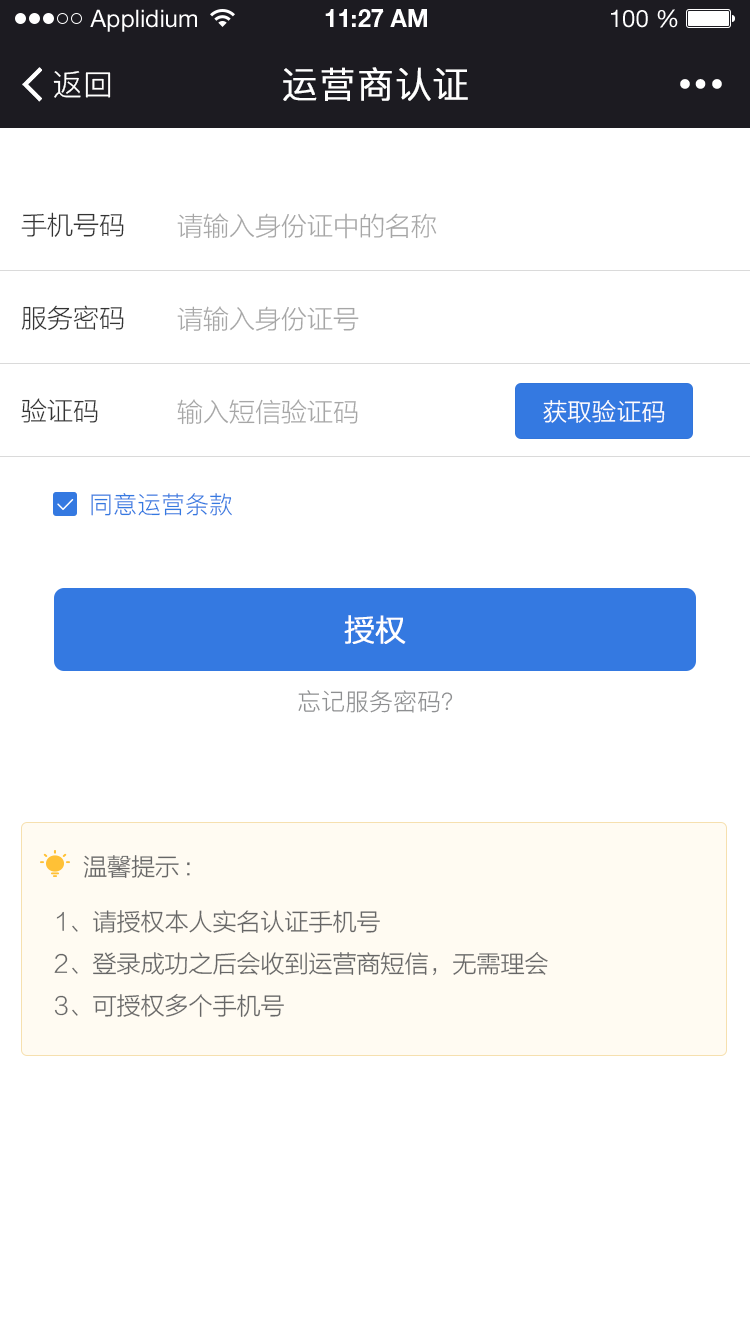
<style>
.page{position:relative;width:750px;height:1334px;background:#ffffff}
.page>*{position:absolute;margin:0}
.t1{font:24px "HelveticaNeueLTStd-Roman";color:#ffffff}
.t2{font:24px "HelveticaNeueLTStd-Bd";color:#ffffff}
.t3{font:30px "PingFang-SC-Regular";letter-spacing:0.025em;color:#ffffff}
.t4{font:36px "PingFang-SC-Regular";letter-spacing:0.025em;color:#ffffff;font-weight:bold}
.t5{font:26px "FZLTXHK--GBK1-0";color:#333333}
.t6{font:26px "FZLTXHK--GBK1-0";color:#a6a6a6}
.t7{font:24px "FZLTXHK--GBK1-0";letter-spacing:0.025em;color:#ffffff}
.t8{font:24px "PingFang-SC-Regular";color:#3479e1}
.t9{font:30px "FZLTXHK--GBK1-0";color:#ffffff;font-weight:bold}
.t10{font:24px "PingFang-SC-Regular";color:#8e8f91}
.t11{font:24px "FZLTXHK--GBK1-0";color:#666666}
</style>
<div class="page">
<p class="t1" style="left:90px;top:9px;width:107px;height:23px">Applidium</p>
<p class="t2" style="left:325px;top:9px;width:102px;height:18px">11:27 AM</p>
<p class="t1" style="left:611px;top:9px;width:67px;height:19px">100 %</p>
<p class="t3" style="left:53px;top:71px;width:58px;height:27px">返回</p>
<p class="t4" style="left:283px;top:67px;width:185px;height:34px">运营商认证</p>
<p class="t5" style="left:21px;top:212px;width:103px;height:25px">手机号码</p>
<p class="t6" style="left:177px;top:213px;width:260px;height:26px">请输入身份证中的名称</p>
<p class="t5" style="left:21px;top:305px;width:103px;height:26px">服务密码</p>
<p class="t6" style="left:177px;top:306px;width:182px;height:26px">请输入身份证号</p>
<p class="t5" style="left:21px;top:398px;width:77px;height:25px">验证码</p>
<p class="t6" style="left:177px;top:399px;width:181px;height:26px">输入短信验证码</p>
<p class="t7" style="left:543px;top:400px;width:122px;height:23px">获取验证码</p>
<p class="t8" style="left:91px;top:493px;width:141px;height:23px">同意运营条款</p>
<p class="t9" style="left:344px;top:615px;width:62px;height:29px">授权</p>
<p class="t10" style="left:298px;top:690px;width:155px;height:23px">忘记服务密码？</p>
<p class="t11" style="left:83px;top:855px;width:107px;height:23px">温馨提示:</p>
<p class="t11" style="left:54px;top:910px;width:494px;height:107px">1、请授权本人实名认证手机号<br>2、登录成功之后会收到运营商短信，无需理会<br>3、可授权多个手机号</p>
</div>
